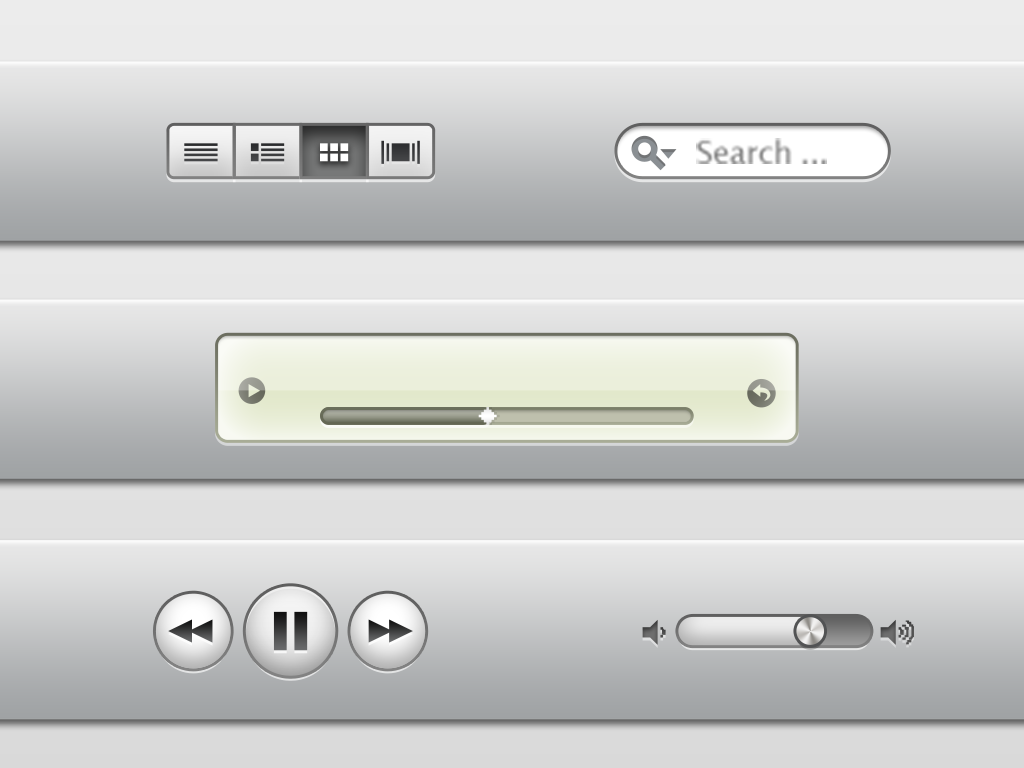
<style>
.page{position:relative;width:1024px;height:768px}
.page>*{position:absolute;margin:0}
.t1{font:30.7px "LucidaSans";letter-spacing:-0.015em;color:#838383}
</style>
<div class="page">
<p class="t1" style="left:696px;top:138px;width:131px;height:26px">Search ...</p>
</div>
